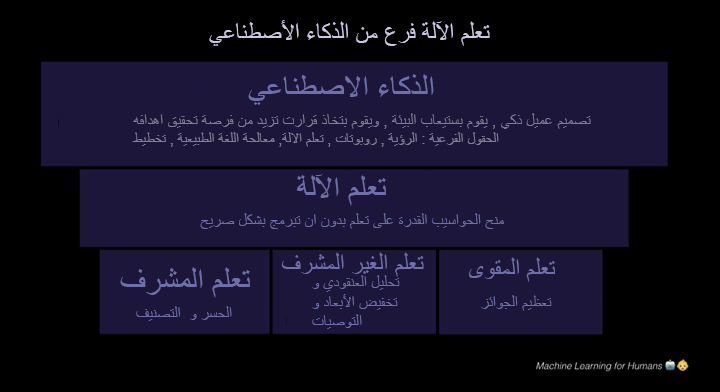
<style>
.page{position:relative;width:720px;height:392px;background:#1c163a}
.page>*{position:absolute;margin:0}
.t1{font:24px "ArialMT";color:#ccc8e4}
.t2{font:32px "ArialMT";color:#6f70ab}
.t3{font:16px "ArialMT";color:#817e95}
.t4{font:14.7px "ArialMT";color:#817e95}
.t5{font:16px "ArialMT";color:#6f70ab}
.t6{font:24px "ArialMT";color:#6f70ab}
</style>
<div class="page">
<p class="t1" style="left:209px;top:20px;width:281px;height:26px">تعلم الآلة فرع من الذكاء الأصطناعي</p>
<p class="t2" style="left:248px;top:74px;width:186px;height:31px">الذكاء الاصطناعي</p>
<p class="t3" style="left:132px;top:113px;width:459px;height:34px">تصميم عميل ذكي , يقوم بستيعاب البيئة , ويقوم بتخاذ قرارت تزيد من فرصة تحقيق اهدافه<br><span class="t4">الحقول الفرعية : الرؤية , روبوتات , تعلم الالة, معالحة اللغة الطبيعية , تخطيط</span></p>
<p class="t2" style="left:296px;top:174px;width:90px;height:32px">تعلم الآلة</p>
<p class="t5" style="left:200px;top:213px;width:304px;height:16px">منح الحواسيب القدرة على تعلم بدون ان تبرمج بشكل صريح</p>
<p class="t6" style="left:281px;top:252px;width:143px;height:25px">تعلم الغير المشرف</p>
<p class="t6" style="left:469px;top:257px;width:86px;height:25px">تعلم المقوى</p>
<p class="t2" style="left:120px;top:267px;width:130px;height:31px">تعلم المشرف</p>
<p class="t5" style="left:312px;top:275px;width:88px;height:54px">تحليل العنقودي و تخفيض الأبعاد و التوصيات</p>
<p class="t5" style="left:481px;top:295px;width:71px;height:16px">تعظيم الجوائز</p>
<p class="t5" style="left:136px;top:306px;width:96px;height:15px">الحسر و  التصنيف</p>
</div>
